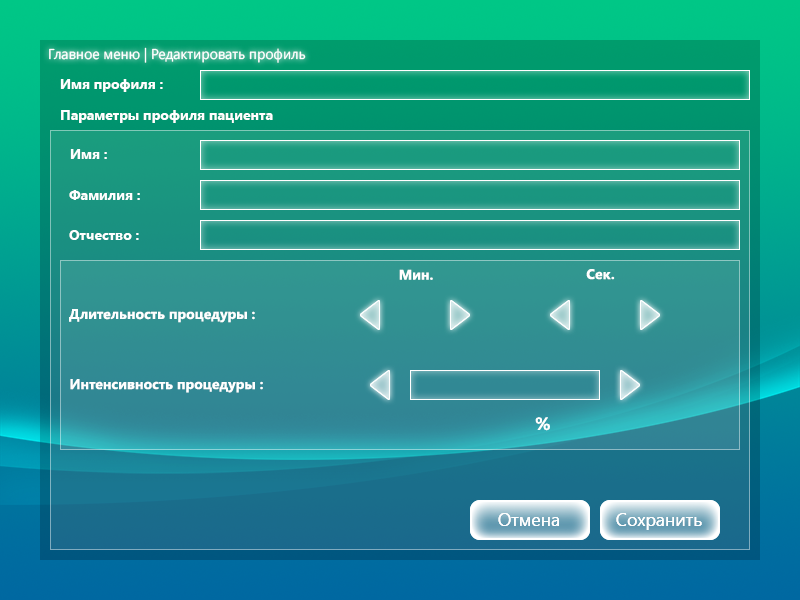
<style>
.page{position:relative;width:800px;height:600px}
.page>*{position:absolute;margin:0}
.t1{font:14.2px "SegoeUI";color:#ffffff}
.t2{font:14px "SegoeUI-Bold";color:#ffffff}
.t3{font:18px "SegoeUI-Bold";color:#ffffff}
.t4{font:18px "SegoeUI";color:#ffffff}
</style>
<div class="page">
<p class="t1" style="left:49px;top:47px;width:257px;height:16px">Главное меню | Редактировать профиль</p>
<p class="t2" style="left:60px;top:79px;width:103px;height:13px">Имя профиля :</p>
<p class="t2" style="left:61px;top:110px;width:212px;height:13px">Параметры профиля пациента</p>
<p class="t2" style="left:70px;top:149px;width:37px;height:10px">Имя :</p>
<p class="t2" style="left:69px;top:190px;width:71px;height:10px">Фамилия :</p>
<p class="t2" style="left:69px;top:230px;width:70px;height:10px">Отчество :</p>
<p class="t2" style="left:399px;top:269px;width:34px;height:11px">Мин.</p>
<p class="t2" style="left:586px;top:269px;width:29px;height:11px">Сек.</p>
<p class="t2" style="left:69px;top:309px;width:186px;height:14px">Длительность процедуры :</p>
<p class="t2" style="left:70px;top:379px;width:193px;height:14px">Интенсивность процедуры :</p>
<p class="t3" style="left:535px;top:417px;width:15px;height:14px">%</p>
<p class="t4" style="left:498px;top:513px;width:61px;height:13px">Отмена</p>
<p class="t4" style="left:498px;top:513px;width:61px;height:13px">Отмена</p>
<p class="t4" style="left:616px;top:513px;width:86px;height:17px">Сохранить</p>
<p class="t4" style="left:616px;top:513px;width:86px;height:17px">Сохранить</p>
</div>
